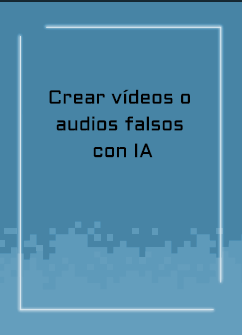
<style>
.page{position:relative;width:242px;height:335px;background:#4784a5}
.page>*{position:absolute;margin:0}
.t1{font:19.2px/26.7px "Aldrich-Regular";letter-spacing:0.005em;color:#000000}
</style>
<div class="page">
<p class="t1" style="left:49px;top:89px;width:141px;height:69px;text-align:center">Crear vídeos o <br>audios falsos <br>con IA</p>
</div>
